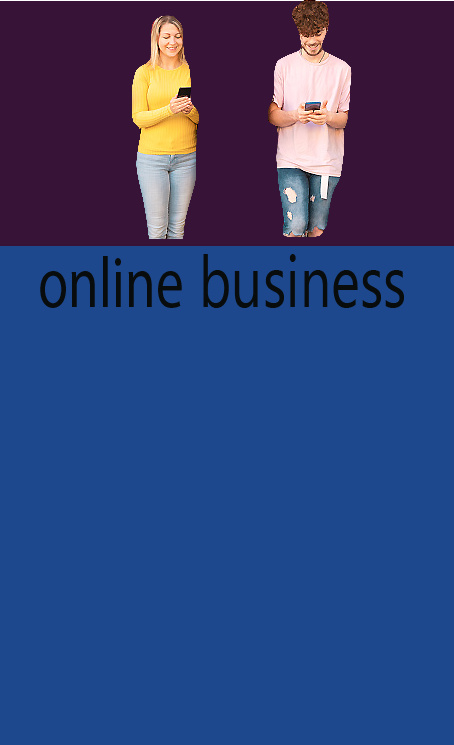
<style>
.page{position:relative;width:454px;height:745px;background:#1d488e}
.page>*{position:absolute;margin:0}
.t1{font:72px "MyanmarText";color:#090c0c;scale:0.77 1}
.t2{font:72px "MyriadPro-Regular";color:#090c0c;scale:0.77 1}
</style>
<div class="page">
<p class="t1" style="left:40px;top:254px;width:364px;height:54px"><span class="t2">online</span> business</p>
</div>
